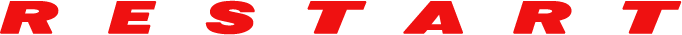
<style>
.page{position:relative;width:682px;height:35px;background:#ffffff}
.page>*{position:absolute;margin:0}
.t1{font:60px "Tactical-Espionage-Action";letter-spacing:0.9em;color:#ef1111;text-transform:uppercase;font-weight:bold}
</style>
<div class="page">
<p class="t1" style="left:0px;top:0px;width:682px;height:35px">RESTART</p>
</div>
